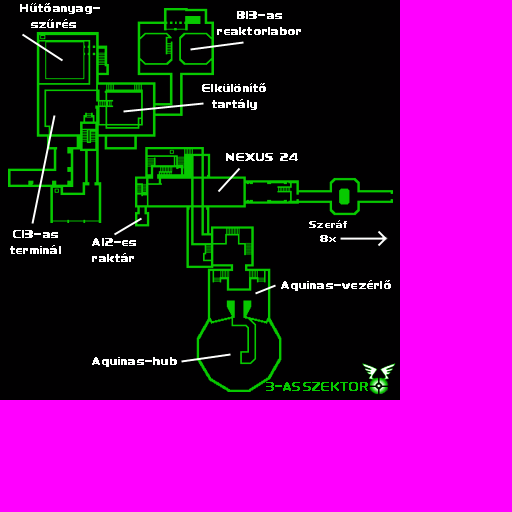
<style>
.page{position:relative;width:512px;height:512px;background:#010001}
.page>*{position:absolute;margin:0}
.t1{font:9.3px/16px "DeusExConsole-Bold";letter-spacing:0.025em;color:#ffffff}
.t2{font:9.3px/16px "DeusExConsole-Bold";letter-spacing:0.3em;color:#ffffff}
.t3{font:9.3px/16px "DeusExConsole-Bold";letter-spacing:0.004em;color:#ffffff}
.t4{font:9.3px "DeusExConsole-Bold";letter-spacing:0.025em;color:#ffffff}
.t5{font:8.2px/14.2px "DeusExConsole-Bold";letter-spacing:0.025em;color:#ffffff}
</style>
<div class="page">
<p class="t1" style="left:20px;top:3px;width:80px;height:25px">H<span class="t2">ű</span><span class="t3">t</span>őanyag-<br>  sz<span class="t2">ű</span>rés</p>
<p class="t1" style="left:217px;top:11px;width:84px;height:24px;text-align:center">B13-as<br>reaktorlabor</p>
<p class="t1" style="left:202px;top:83px;width:64px;height:27px;text-align:center">Elkülönítő<br>tartály</p>
<p class="t4" style="left:226px;top:153px;width:72px;height:8px">NEXUS 24</p>
<p class="t5" style="left:309px;top:220px;width:38px;height:22px;text-align:center">Szeráf<br>8x</p>
<p class="t1" style="left:10px;top:230px;width:51px;height:24px;text-align:center">C13-as<br>terminál</p>
<p class="t1" style="left:92px;top:238px;width:44px;height:24px">A12-es<br>raktár</p>
<p class="t4" style="left:281px;top:280px;width:110px;height:11px">Aquinas-vezérlő</p>
<p class="t4" style="left:92px;top:357px;width:85px;height:10px">Aquinas-hub</p>
</div>
